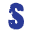
<style>
.page{position:relative;width:32px;height:32px;background:#ffffff}
.page>*{position:absolute;margin:0}
.t1{font:35.8px "28DaysLater";letter-spacing:-0.025em;color:#2a3a97;font-weight:bold;scale:0.9 1}
</style>
<div class="page">
<p class="t1" style="left:8px;top:2px;width:16px;height:28px">S</p>
</div>
